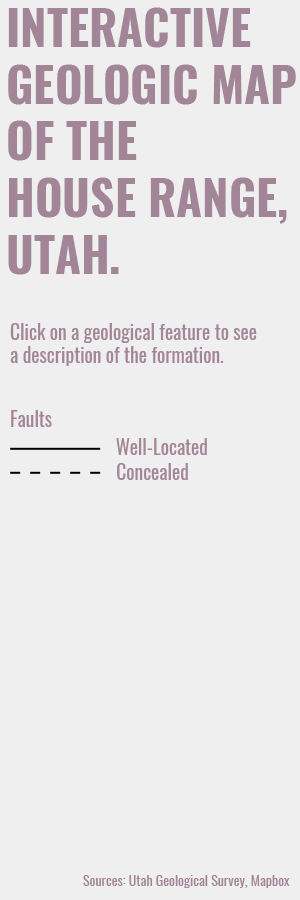
<style>
.page{position:relative;width:300px;height:900px;background:#efefef}
.page>*{position:absolute;margin:0}
.t1{font:47.2px "Oswald-Bold";color:#a28596}
.t2{font:19.4px "Oswald-Regular";color:#a28596}
.t3{font:13.9px "Oswald-Regular";color:#a28596}
</style>
<div class="page">
<p class="t1" style="left:8px;top:7px;width:288px;height:268px">INTERACTIVE<br>GEOLOGIC MAP<br>OF THE<br>HOUSE RANGE,<br>UTAH.</p>
<p class="t2" style="left:10px;top:323px;width:247px;height:43px">Click on a geological feature to see<br>a description of the formation.</p>
<p class="t2" style="left:11px;top:410px;width:41px;height:17px">Faults</p>
<p class="t2" style="left:116px;top:438px;width:91px;height:17px">Well-Located</p>
<p class="t2" style="left:117px;top:463px;width:71px;height:17px">Concealed</p>
<p class="t3" style="left:83px;top:875px;width:207px;height:13px">Sources: Utah Geological Survey, Mapbox</p>
</div>
